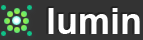
<style>
.page{position:relative;width:143px;height:40px;background:#333333}
.page>*{position:absolute;margin:0}
.t1{font:36px "Arial-BoldMT";color:#fefefe}
</style>
<div class="page">
<p class="t1" style="left:48px;top:8px;width:92px;height:26px">lumin</p>
</div>
